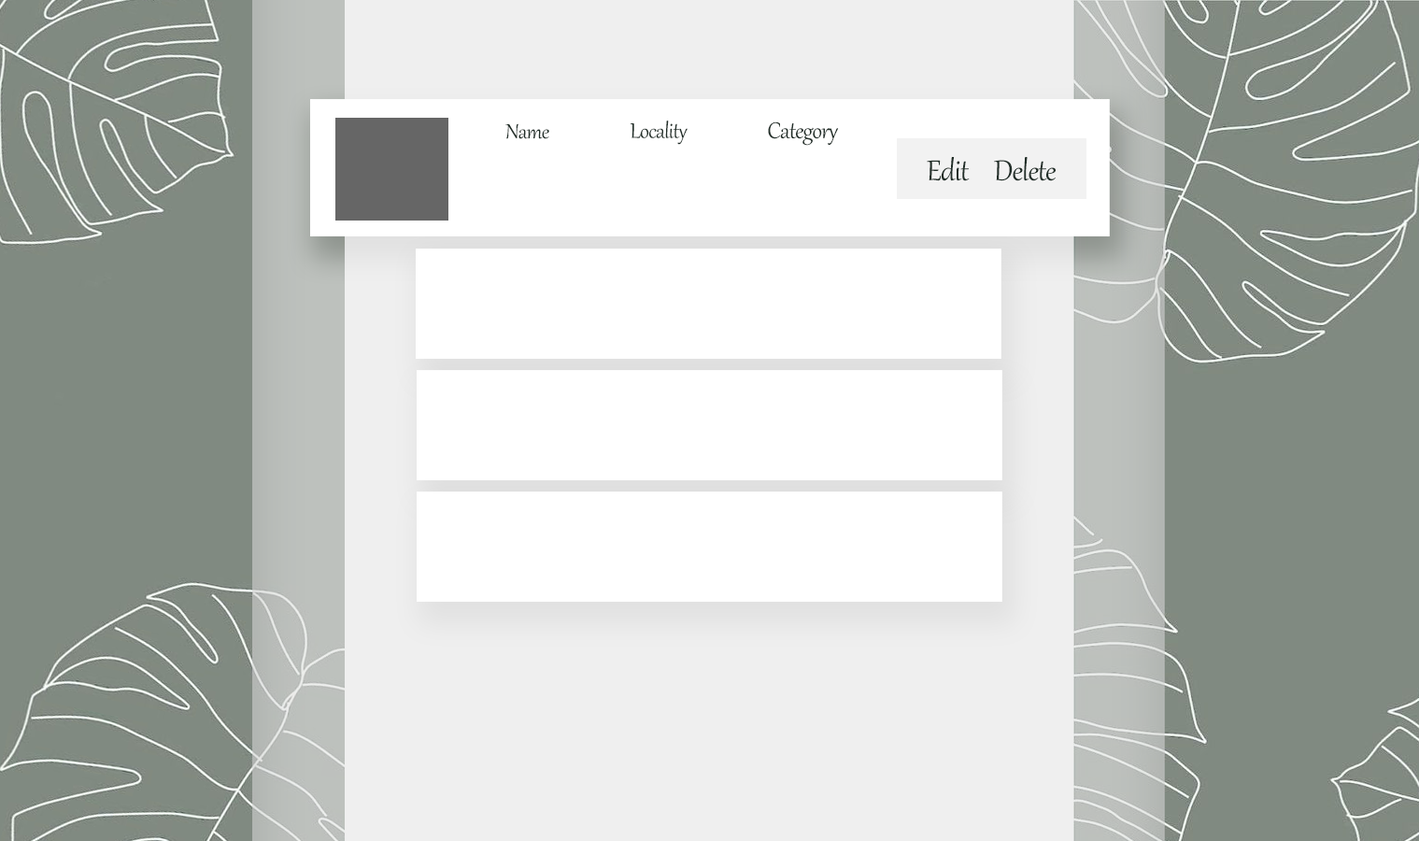
<style>
.page{position:relative;width:1419px;height:841px;background:#ffffff}
.page>*{position:absolute;margin:0}
.t1{font:25.3px "Gabriola";letter-spacing:-0.025em;color:#212e28}
.t2{font:25.8px "Gabriola";letter-spacing:-0.025em;color:#212e28}
.t3{font:27.6px "Gabriola";letter-spacing:-0.025em;color:#212e28}
.t4{font:35px "Gabriola";letter-spacing:-0.025em;color:#212e28}
</style>
<div class="page">
<p class="t1" style="left:505px;top:123px;width:44px;height:16px">Name</p>
<p class="t2" style="left:629px;top:120px;width:58px;height:25px">Locality</p>
<p class="t3" style="left:768px;top:121px;width:71px;height:25px">Category</p>
<p class="t4" style="left:926px;top:157px;width:129px;height:24px">Edit     Delete</p>
</div>
